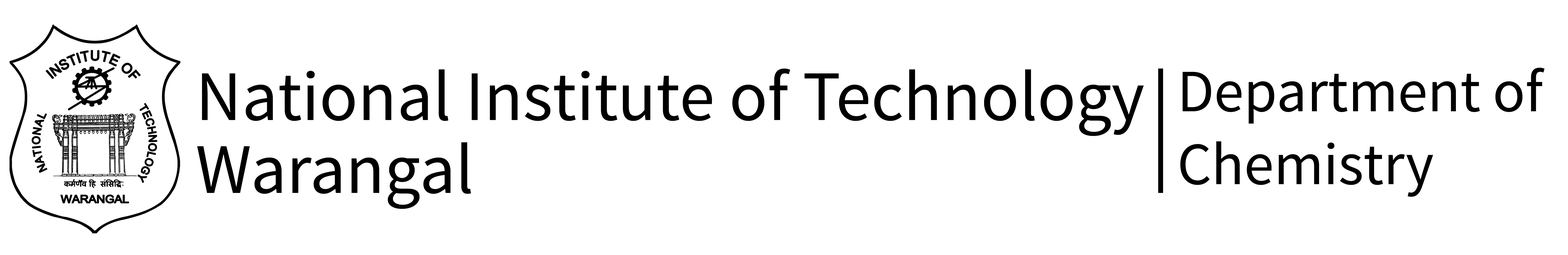
<style>
.page{position:relative;width:1568px;height:255px;background:#ffffff}
.page>*{position:absolute;margin:0}
.t1{font:70.9px/36.4px "SourceSansPro-Regular";color:#000000}
.t2{font:60px/36.4px "SourceSansPro-Regular";color:#000000}
</style>
<div class="page">
<p class="t1" style="left:197px;top:68px;width:947px;height:141px">National Institute of Technology <br><br>Warangal</p>
<p class="t2" style="left:1180px;top:67px;width:365px;height:129px">Department of <br><br>Chemistry</p>
</div>
